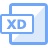
<style>
.page{position:relative;width:48px;height:48px;background:#ffffff}
.page>*{position:absolute;margin:0}
.t1{font:12.5px "Verdana-Bold";color:#6fa6f7}
</style>
<div class="page">
<p class="t1" style="left:6px;top:19px;width:21px;height:10px">XD</p>
</div>
